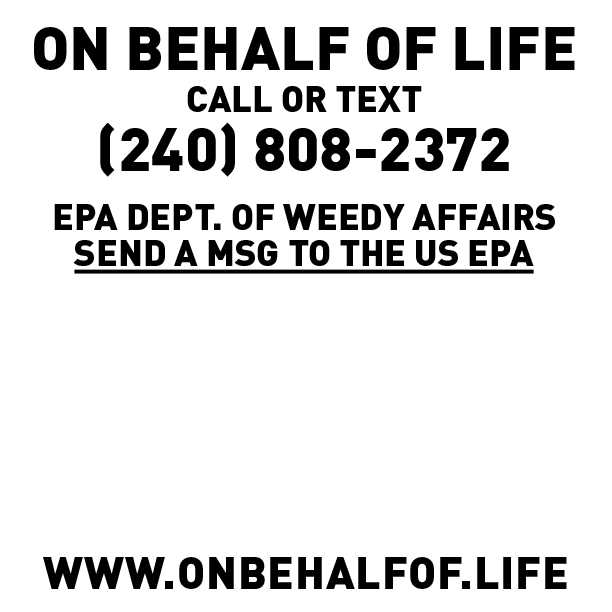
<style>
.page{position:relative;width:612px;height:612px;background:#ffffff}
.page>*{position:absolute;margin:0}
.t1{font:36px/59px "DIN-Black";color:#000000}
.t2{font:60px/59px "DIN-Black";color:#000000}
.t3{font:36px/42px "DIN-Black";color:#000000}
.t4{font:36px/36px "DIN-Black";color:#000000;text-decoration:underline}
</style>
<div class="page">
<p class="t1" style="left:34px;top:27px;width:541px;height:247px;text-align:center"><span class="t2">ON BEHALF OF LIFE<br></span><span class="t3">CALL OR TEXT<br></span><span class="t2">(240) 808-2372<br></span>EPA DEPT. OF WEEDY AFFAIRS<br><span class="t4">SEND A MSG TO THE US EPA</span></p>
</div>
